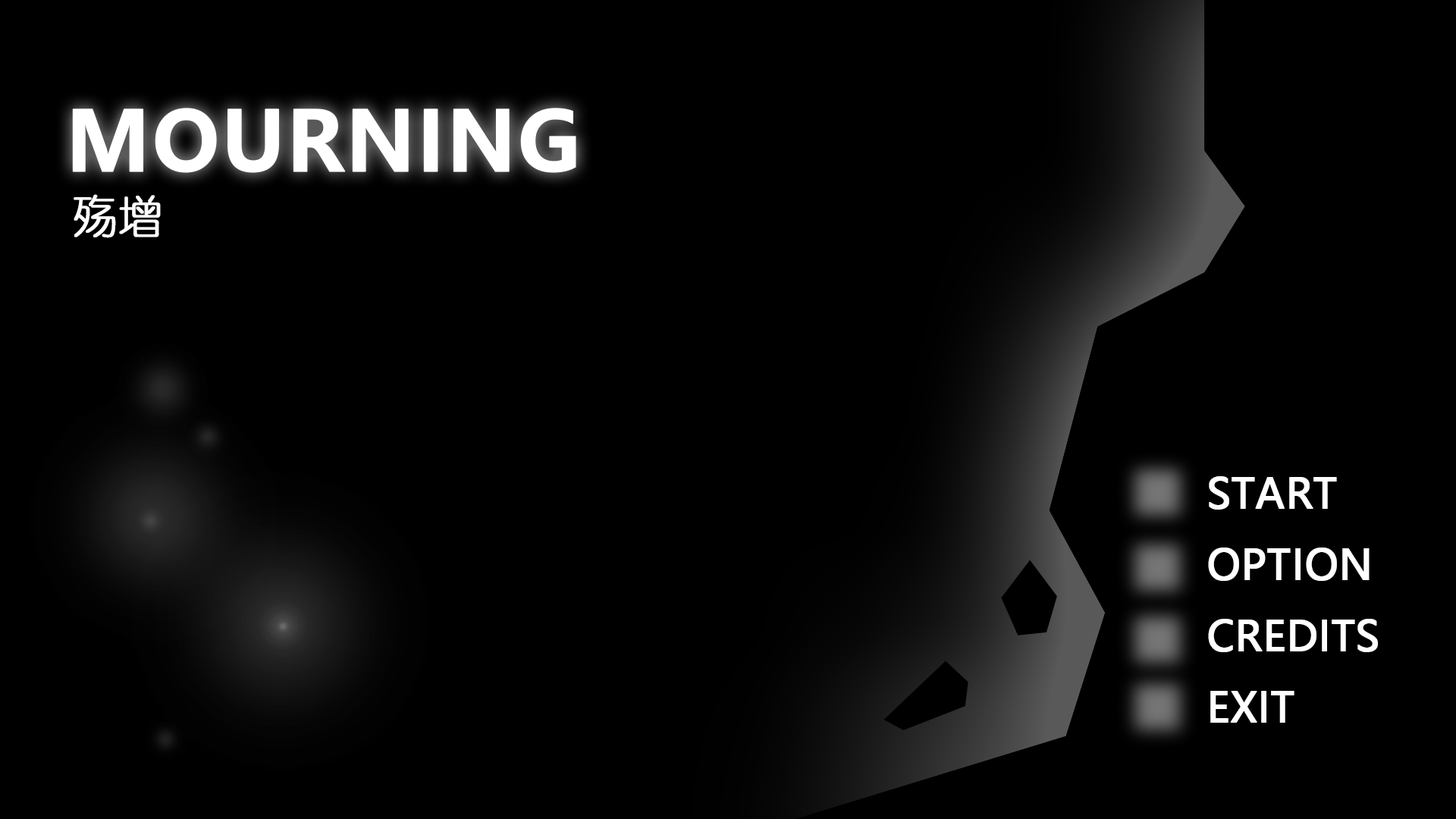
<style>
.page{position:relative;width:1456px;height:819px;background:#000000}
.page>*{position:absolute;margin:0}
.t1{font:44.4px "YouYuan";color:#ffffff;text-transform:uppercase;font-weight:bold}
.t2{font:40.7px "MicrosoftYaHei";color:#ffffff;text-transform:uppercase;font-weight:bold}
</style>
<div class="page">
<p class="t1" style="left:74px;top:194px;width:87px;height:44px">殇增</p>
<p class="t2" style="left:1208px;top:476px;width:170px;height:247px">START<br>OPTION<br>credits<br>EXIT</p>
</div>
